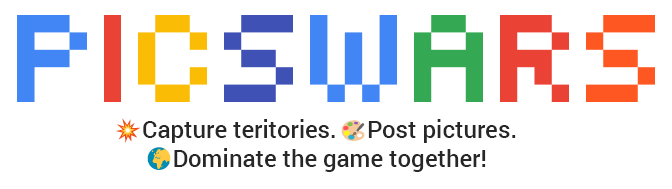
<style>
.page{position:relative;width:672px;height:189px;background:#ffffff}
.page>*{position:absolute;margin:0}
.t1{font:24px "Roboto-Medium";color:#272727}
</style>
<div class="page">
<p class="t1" style="left:143px;top:119px;width:373px;height:53px;text-align:center">Capture teritories.     Post pictures.<br>Dominate the game together!</p>
</div>
